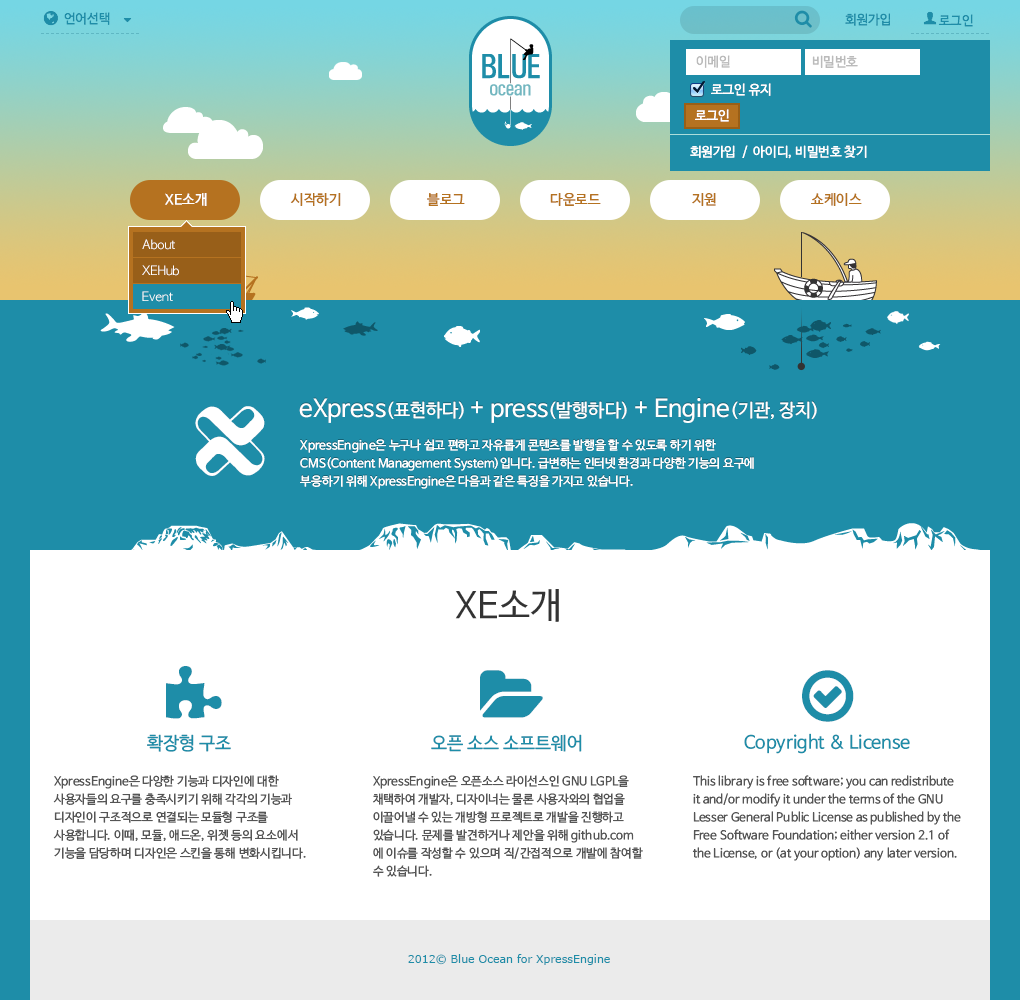
<style>
.page{position:relative;width:1020px;height:1000px;background:#ffffff}
.page>*{position:absolute;margin:0}
.t1{font:13px "NanumBarunGothicOTF";color:#1e8da8}
.t2{font:13px "NanumBarunGothicOTF";color:#bbbbbb}
.t3{font:13px "NanumBarunGothicOTF";color:#ffffff}
.t4{font:14px "NanumBarunGothicOTF";color:#ffffff}
.t5{font:14px "NanumBarunGothicOTF";color:#b57220}
.t6{font:12px/26px "AppleGothic";color:#ffffff}
.t7{font:24px "NanumBarunGothicOTF";color:#ffffff}
.t8{font:18px "NanumBarunGothicOTF";color:#ffffff}
.t9{font:12px/18px "NanumBarunGothicOTF";color:#ffffff}
.t10{font:36px "NanumBarunGothicOTF";color:#333333}
.t11{font:18px "NanumBarunGothicOTF";color:#1e8da8}
.t12{font:12px/18px "NanumBarunGothicOTF";color:#555555}
.t13{font:11px "Verdana";color:#1e8da8}
</style>
<div class="page">
<p class="t1" style="left:64px;top:12px;width:46px;height:13px">언어선택</p>
<p class="t1" style="left:845px;top:13px;width:45px;height:13px">회원가입</p>
<p class="t2" style="left:696px;top:55px;width:34px;height:13px">이메일</p>
<p class="t2" style="left:812px;top:55px;width:46px;height:13px">비밀번호</p>
<p class="t3" style="left:711px;top:83px;width:60px;height:13px">로그인 유지</p>
<p class="t3" style="left:695px;top:109px;width:34px;height:13px">로그인</p>
<p class="t3" style="left:690px;top:145px;width:177px;height:14px">회원가입  /  아이디, 비밀번호 찾기</p>
<p class="t4" style="left:165px;top:193px;width:42px;height:13px">XE소개</p>
<p class="t5" style="left:290px;top:193px;width:51px;height:13px">시작하기</p>
<p class="t5" style="left:427px;top:193px;width:38px;height:13px">블로그</p>
<p class="t5" style="left:550px;top:193px;width:51px;height:13px">다운로드</p>
<p class="t5" style="left:692px;top:193px;width:24px;height:13px">지원</p>
<p class="t5" style="left:811px;top:193px;width:51px;height:13px">쇼케이스</p>
<p class="t6" style="left:142px;top:239px;width:37px;height:63px">About<br>XEHub<br>Event</p>
<p class="t7" style="left:299px;top:398px;width:518px;height:25px">eXpress<span class="t8">(표현하다) </span>+ press<span class="t8">(발행하다) </span>+ Engine<span class="t8">(기관, 장치)</span></p>
<p class="t9" style="left:300px;top:439px;width:454px;height:50px">XpressEngine은 누구나 쉽고 편하고 자유롭게 콘텐츠를 발행을 할 수 있도록 하기 위한 <br>CMS(Content Management System)입니다. 급변하는 인터넷 환경과 다양한 기능의 요구에 <br>부응하기 위해 XpressEngine은 다음과 같은 특징을 가지고 있습니다.</p>
<p class="t10" style="left:455px;top:589px;width:104px;height:33px">XE소개</p>
<p class="t11" style="left:147px;top:734px;width:84px;height:18px">확장형 구조</p>
<p class="t11" style="left:431px;top:734px;width:151px;height:18px">오픈 소스 소프트웨어</p>
<p class="t11" style="left:744px;top:733px;width:166px;height:21px">Copyright &amp; License</p>
<p class="t12" style="left:53px;top:775px;width:253px;height:84px">XpressEngine은 다양한 기능과 디자인에 대한 사용자들의 요구를 충족시키기 위해 각각의 기능과 디자인이 구조적으로 연결되는 모듈형 구조를 사용합니다. 이때, 모듈, 애드온, 위젯 등의 요소에서 기능을 담당하며 디자인은 스킨을 통해 변화시킵니다.</p>
<p class="t12" style="left:373px;top:775px;width:270px;height:102px">XpressEngine은 오픈소스 라이선스인 GNU LGPL을 채택하여 개발자, 디자이너는 물론 사용자와의 협업을 이끌어낼 수 있는 개방형 프로젝트로 개발을 진행하고 있습니다. 문제를 발견하거나 제안을 위해 github.com에 이슈를 작성할 수 있으며 직/간접적으로 개발에 참여할 수 있습니다.</p>
<p class="t12" style="left:692px;top:775px;width:269px;height:86px">This library is free software; you can redistribute it and/or modify it under the terms of the GNU Lesser General Public License as published by the Free Software Foundation; either version 2.1 of the License, or (at your option) any later version.</p>
<p class="t13" style="left:408px;top:954px;width:202px;height:11px">2012© Blue Ocean for XpressEngine</p>
</div>
